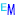
<style>
.page{position:relative;width:16px;height:16px;background:#ffffff}
.page>*{position:absolute;margin:0}
.t1{font:11.2px "MyriadPro-Regular";color:#1fcceb;scale:1.33 1}
.t2{font:16.4px "MyriadPro-Regular";color:#0600ff;scale:0.62 1}
</style>
<div class="page">
<p class="t1" style="left:0px;top:3px;width:7px;height:9px;rotate:-2deg">E</p>
<p class="t2" style="left:7px;top:4px;width:8px;height:11px">M</p>
</div>
